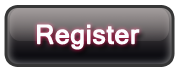
<style>
.page{position:relative;width:180px;height:70px}
.page>*{position:absolute;margin:0}
.t1{font:33.3px "Tunga";color:#fdfdff;font-weight:bold}
</style>
<div class="page">
<p class="t1" style="left:37px;top:24px;width:103px;height:26px">Register</p>
</div>
